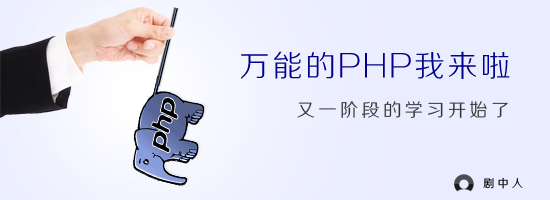
<style>
.page{position:relative;width:550px;height:200px;background:#eaedff}
.page>*{position:absolute;margin:0}
.t1{font:30px "FZZXHJW--GB1-0";letter-spacing:0.1em;color:#000088}
.t2{font:18px "FZZXHJW--GB1-0";letter-spacing:0.2em;color:#333333}
.t3{font:11px "FZZXHJW--GB1-0";letter-spacing:0.3em}
</style>
<div class="page">
<p class="t1" style="left:241px;top:51px;width:269px;height:28px">万能的PHP我来啦</p>
<p class="t2" style="left:297px;top:101px;width:211px;height:17px">又一阶段的学习开始了</p>
<p class="t3" style="left:483px;top:177px;width:40px;height:12px">剧中人</p>
</div>
